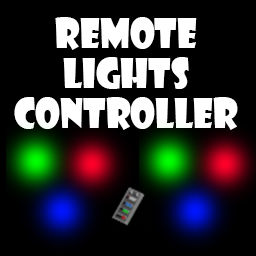
<style>
.page{position:relative;width:256px;height:256px;background:#000000}
.page>*{position:absolute;margin:0}
.t1{font:40px/40px "ShowcardGothic-Reg";color:#ffffff;scale:0.9 1}
</style>
<div class="page">
<p class="t1" style="left:14px;top:17px;width:224px;height:113px;text-align:center">Remote<br>Lights<br>Controller</p>
</div>
